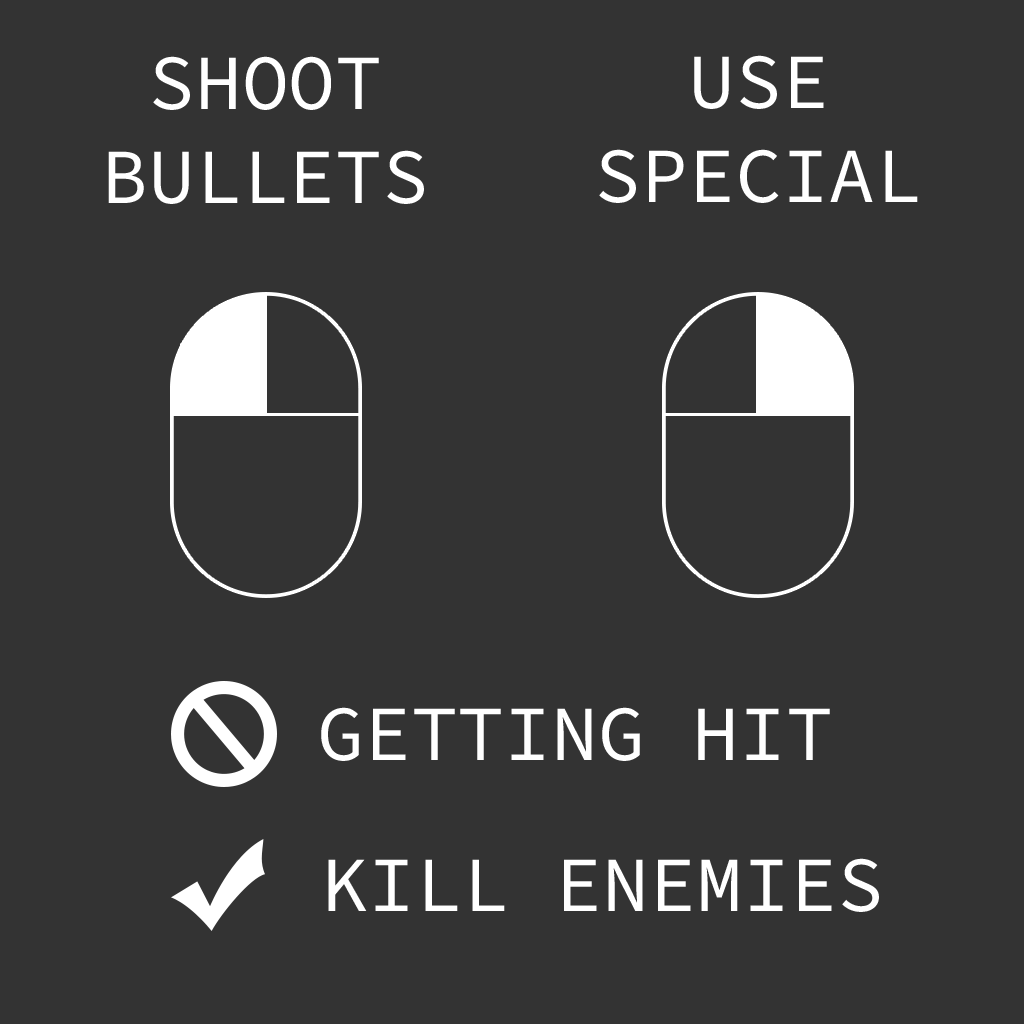
<style>
.page{position:relative;width:1024px;height:1024px;background:#333333}
.page>*{position:absolute;margin:0}
.t1{font:78.1px "SourceCodeVariable-Roman";color:#ffffff}
</style>
<div class="page">
<p class="t1" style="left:108px;top:56px;width:316px;height:148px;text-align:center">SHOOT<br>BULLETS</p>
<p class="t1" style="left:321px;top:707px;width:509px;height:54px">GETTING HIT</p>
<p class="t1" style="left:328px;top:858px;width:551px;height:54px">KILL ENEMIES</p>
</div>
